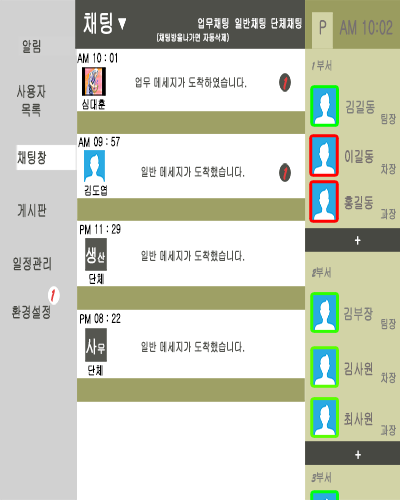
<style>
.page{position:relative;width:400px;height:500px;background:#ffffff}
.page>*{position:absolute;margin:0}
.t1{font:25px "Gulim";letter-spacing:-0.025em;color:#ffffff;font-weight:bold;scale:0.64 1}
.t2{font:12.5px "Gulim";letter-spacing:-0.025em;color:#ffffff;font-weight:bold;scale:0.64 1}
.t3{font:18.8px "Gulim";letter-spacing:-0.025em;color:#777070;font-weight:bold;scale:0.64 1}
.t4{font:15.6px "Gulim";letter-spacing:-0.025em;color:#474842;font-weight:bold;scale:0.64 1}
.t5{font:9.4px "Gulim";letter-spacing:-0.025em;color:#ffffff;font-weight:bold;scale:0.64 1}
.t6{font:12.5px "Gulim";letter-spacing:-0.025em;color:#000000;font-weight:bold;scale:0.64 1}
.t7{font:12.5px "Gulim";letter-spacing:-0.025em;color:#7f7f7c;font-weight:bold;scale:0.64 1}
.t8{font:12.5px "BrushScriptMT";letter-spacing:-0.025em;color:#7f7f7c;font-weight:bold;scale:0.64 1}
.t9{font:12.5px "Gulim";letter-spacing:-0.025em;color:#52534e;font-weight:bold;scale:0.64 1}
.t10{font:18.8px "BrushScriptMT";letter-spacing:-0.025em;color:#e63d3d;font-weight:bold;scale:0.64 1}
.t11{font:15.6px/18.8px "Gulim";letter-spacing:-0.025em;color:#474842;font-weight:bold;scale:0.64 1}
.t12{font:15.6px "Gulim";letter-spacing:-0.025em;color:#7f7f7c;font-weight:bold;scale:0.64 1}
.t13{font:15.6px "Gulim";letter-spacing:-0.025em;color:#777070;font-weight:bold;scale:0.64 1}
.t14{font:15.6px "Gulim";letter-spacing:-0.025em;color:#ffffff;font-weight:bold;scale:0.64 1}
.t15{font:18.8px "Gulim";letter-spacing:-0.025em;color:#ffffff;font-weight:bold;scale:0.64 1}
</style>
<div class="page">
<p class="t1" style="left:83px;top:12px;width:29px;height:22px">채팅</p>
<p class="t2" style="left:198px;top:18px;width:31px;height:11px">업무채팅</p>
<p class="t2" style="left:235px;top:18px;width:31px;height:11px">일반채팅</p>
<p class="t2" style="left:271px;top:18px;width:31px;height:11px">단체채팅</p>
<p class="t3" style="left:319px;top:20px;width:8px;height:15px">P</p>
<p class="t3" style="left:339px;top:19px;width:54px;height:16px">AM 10:02</p>
<p class="t4" style="left:22px;top:39px;width:19px;height:14px">알림</p>
<p class="t5" style="left:157px;top:33px;width:72px;height:9px">(채팅방을나가면 자동삭제)</p>
<p class="t6" style="left:77px;top:53px;width:12px;height:11px">AM</p>
<p class="t6" style="left:93px;top:52px;width:24px;height:11px">10 : 01</p>
<p class="t7" style="left:312px;top:60px;width:20px;height:11px"><span class="t8">1 </span>부서</p>
<p class="t9" style="left:135px;top:77px;width:112px;height:11px">업무 메세지가 도착하였습니다.</p>
<p class="t10" style="left:283px;top:77px;width:5px;height:13px">1</p>
<p class="t11" style="left:17px;top:84px;width:29px;height:33px;text-align:center">사용자<br>목록</p>
<p class="t6" style="left:82px;top:99px;width:24px;height:11px">심대훈</p>
<p class="t12" style="left:346px;top:100px;width:29px;height:14px">김길동</p>
<p class="t7" style="left:381px;top:113px;width:15px;height:12px">팀장</p>
<p class="t6" style="left:78px;top:137px;width:12px;height:11px">AM</p>
<p class="t6" style="left:94px;top:136px;width:26px;height:11px">09 : 57</p>
<p class="t13" style="left:345px;top:149px;width:29px;height:15px">이길동</p>
<p class="t4" style="left:17px;top:151px;width:30px;height:14px">채팅창</p>
<p class="t9" style="left:141px;top:166px;width:104px;height:12px">일반 메세지가 도착했습니다.</p>
<p class="t10" style="left:283px;top:167px;width:5px;height:13px">1</p>
<p class="t7" style="left:381px;top:163px;width:15px;height:12px">차장</p>
<p class="t6" style="left:84px;top:185px;width:23px;height:11px">김도엽</p>
<p class="t13" style="left:344px;top:196px;width:29px;height:14px">홍길동</p>
<p class="t4" style="left:17px;top:203px;width:30px;height:15px">게시판</p>
<p class="t7" style="left:380px;top:208px;width:16px;height:12px">과장</p>
<p class="t6" style="left:80px;top:224px;width:11px;height:11px">PM</p>
<p class="t6" style="left:95px;top:224px;width:26px;height:10px">11 : 29</p>
<p class="t14" style="left:354px;top:236px;width:7px;height:9px">+</p>
<p class="t4" style="left:13px;top:257px;width:38px;height:14px">일정관리</p>
<p class="t15" style="left:86px;top:247px;width:19px;height:17px">생<span class="t2">산</span></p>
<p class="t9" style="left:141px;top:250px;width:104px;height:12px">일반 메세지가 도착했습니다.</p>
<p class="t7" style="left:312px;top:267px;width:19px;height:11px"><span class="t8">2</span>부서</p>
<p class="t6" style="left:89px;top:273px;width:15px;height:12px">단체</p>
<p class="t10" style="left:51px;top:289px;width:4px;height:13px">1</p>
<p class="t4" style="left:12px;top:305px;width:38px;height:14px">환경설정</p>
<p class="t6" style="left:80px;top:314px;width:11px;height:10px">PM</p>
<p class="t6" style="left:94px;top:313px;width:27px;height:11px">08 : 22</p>
<p class="t12" style="left:344px;top:307px;width:29px;height:14px">김부장</p>
<p class="t7" style="left:381px;top:318px;width:15px;height:12px">팀장</p>
<p class="t15" style="left:86px;top:338px;width:19px;height:17px">사<span class="t2">무</span></p>
<p class="t9" style="left:141px;top:341px;width:104px;height:12px">일반 메세지가 도착했습니다.</p>
<p class="t6" style="left:88px;top:365px;width:15px;height:11px">단체</p>
<p class="t13" style="left:344px;top:362px;width:29px;height:14px">김사원</p>
<p class="t7" style="left:381px;top:372px;width:15px;height:12px">차장</p>
<p class="t13" style="left:344px;top:412px;width:29px;height:14px">최사원</p>
<p class="t7" style="left:380px;top:425px;width:16px;height:11px">과장</p>
<p class="t14" style="left:355px;top:450px;width:6px;height:9px">+</p>
<p class="t7" style="left:311px;top:472px;width:20px;height:11px"><span class="t8">3</span>부서</p>
</div>
